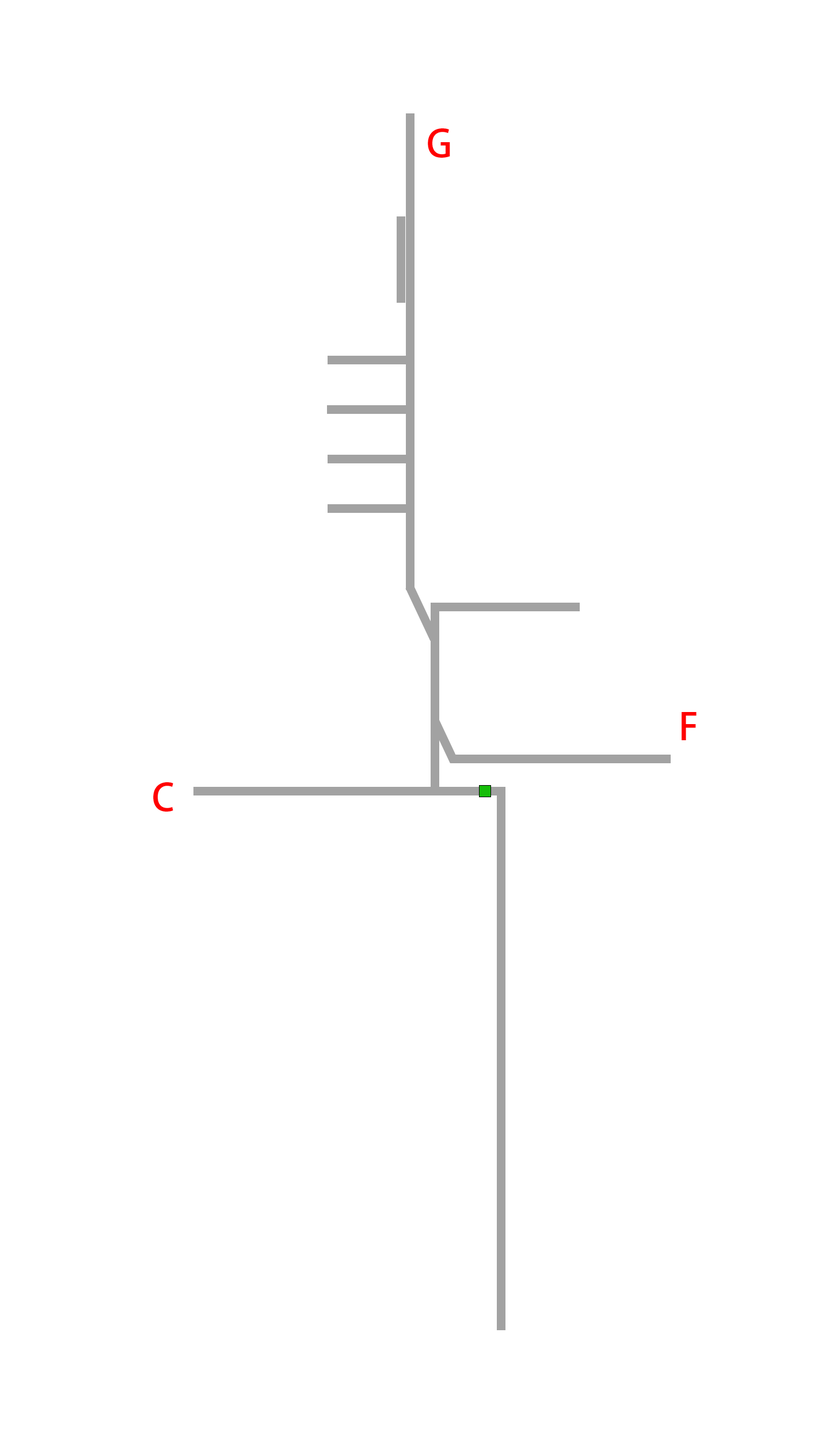
<style>
.page{position:relative;width:829px;height:1439px;background:#ffffff}
.page>*{position:absolute;margin:0}
.t1{font:36.8px "AdobeHeitiStd-Regular";color:#ff0000}
</style>
<div class="page">
<p class="t1" style="left:428px;top:128px;width:22px;height:30px">G</p>
<p class="t1" style="left:681px;top:712px;width:15px;height:28px">F</p>
<p class="t1" style="left:153px;top:782px;width:20px;height:29px">C</p>
</div>
